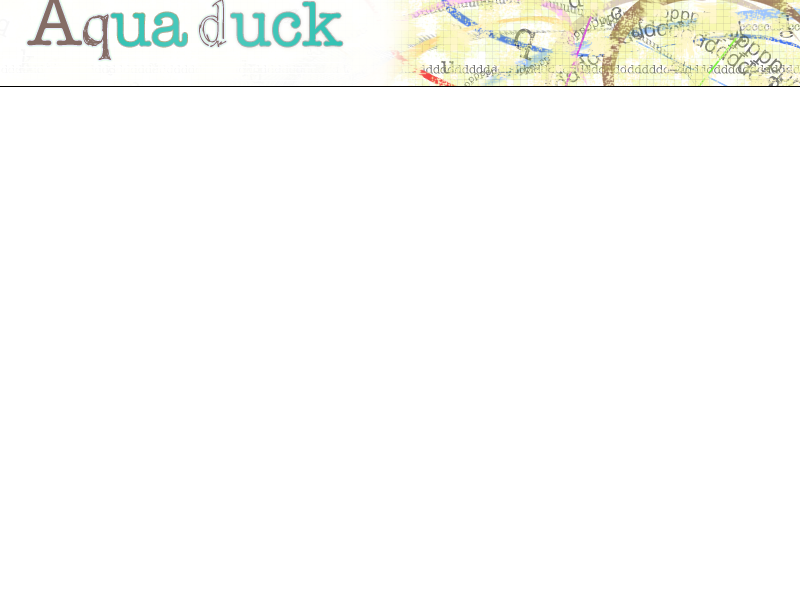
<style>
.page{position:relative;width:800px;height:600px;background:#ffffff}
.page>*{position:absolute;margin:0}
.t1{font:64px "AmericanTypewriter";color:#2fc1b2}
.t2{font:20.4px "AmericanTypewriter";scale:0.9 1}
.t3{font:24px "AmericanTypewriter";color:#818373}
.t4{font:24px "AmericanTypewriter"}
.t5{font:15.5px "AmericanTypewriter";color:#faf2c1;scale:1.36 1}
.t6{font:41.6px "AmericanTypewriter"}
.t7{font:20px "AmericanTypewriter"}
.t8{font:35.6px "AmericanTypewriter";scale:0.72 1}
.t9{font:13.6px "AmericanTypewriter";scale:2.26 1}
.t10{font:31.4px "AmericanTypewriter";color:#f9f9f8;scale:0.77 1}
.t11{font:16.2px "AmericanTypewriter";scale:0.68 1}
.t12{font:24px "AmericanTypewriter";color:#fbfbf9}
.t13{font:15.4px "AmericanTypewriter";color:#f9f9f8}
.t14{font:24px "AmericanTypewriter";color:#fafbf8}
</style>
<div class="page">
<p class="t1" style="left:231px;top:2px;width:112px;height:45px">uck</p>
<p class="t2" style="left:482px;top:1px;width:12px;height:11px">u</p>
<p class="t1" style="left:111px;top:12px;width:76px;height:35px">ua</p>
<p class="t3" style="left:611px;top:7px;width:11px;height:13px">c</p>
<p class="t4" style="left:778px;top:13px;width:14px;height:17px">q</p>
<p class="t5" style="left:451px;top:23px;width:12px;height:12px;rotate:-166deg">u</p>
<p class="t6" style="left:514px;top:28px;width:22px;height:33px;rotate:19deg">q</p>
<p class="t7" style="left:630px;top:27px;width:13px;height:11px;rotate:8deg">a</p>
<p class="t8" style="left:730px;top:18px;width:16px;height:26px;rotate:-9deg">d</p>
<p class="t9" style="left:779px;top:30px;width:14px;height:8px">c</p>
<p class="t10" style="left:18px;top:48px;width:16px;height:24px;rotate:6deg">k</p>
<p class="t11" style="left:307px;top:48px;width:6px;height:9px;rotate:-12deg">c</p>
<p class="t12" style="left:241px;top:60px;width:16px;height:17px">k</p>
<p class="t4" style="left:441px;top:61px;width:15px;height:13px">u</p>
<p class="t4" style="left:669px;top:61px;width:17px;height:13px;rotate:108deg">u</p>
<p class="t13" style="left:107px;top:66px;width:9px;height:10px;rotate:-150deg">a</p>
<p class="t14" style="left:250px;top:67px;width:14px;height:17px">d</p>
</div>
